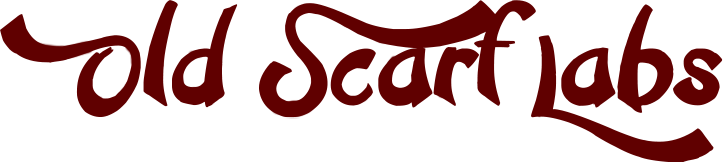
<style>
.page{position:relative;width:725px;height:162px;background:#ffffff}
.page>*{position:absolute;margin:0}
.t1{font:116.9px "ConfettiStream";color:#600000}
</style>
<div class="page">
<p class="t1" style="left:0px;top:0px;width:723px;height:163px">Old Scarf Labs</p>
</div>
